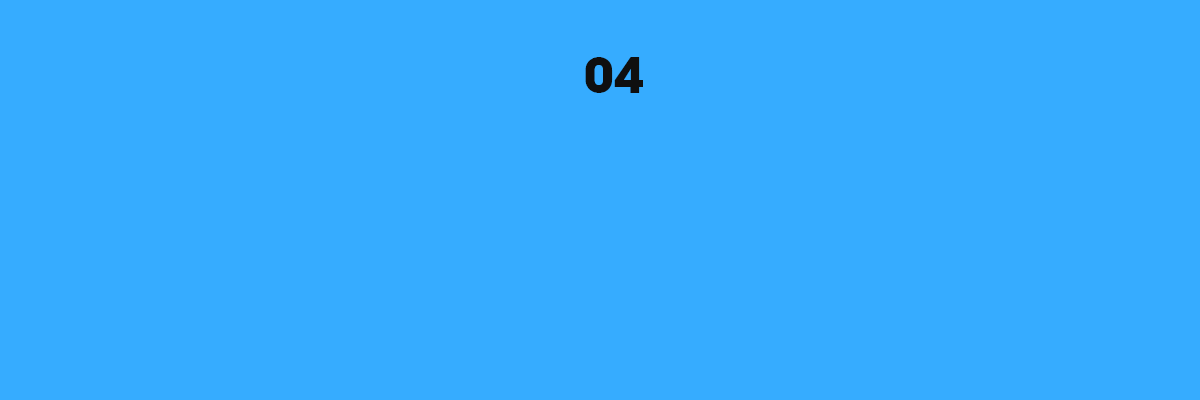
<style>
.page{position:relative;width:1200px;height:400px;background:#36acff}
.page>*{position:absolute;margin:0}
.t1{font:48px "SFBold-Bold";color:#0f0f0f}
</style>
<div class="page">
<p class="t1" style="left:585px;top:57px;width:58px;height:36px">04</p>
</div>
